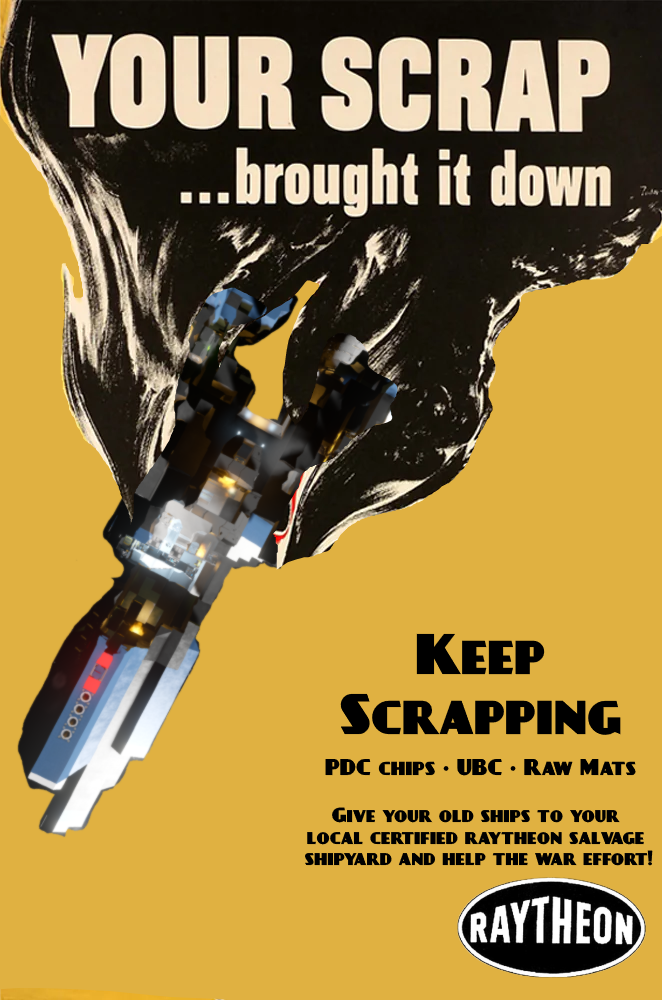
<style>
.page{position:relative;width:662px;height:1000px;background:#e0b141}
.page>*{position:absolute;margin:0}
.t1{font:50px "DayPosterBlack";color:#000000}
.t2{font:20px "DayPosterBlack";color:#000000}
.t3{font:18px "DayPosterBlack";color:#000000}
</style>
<div class="page">
<p class="t1" style="left:340px;top:633px;width:281px;height:102px;text-align:center">Keep<br>Scrapping</p>
<p class="t2" style="left:325px;top:758px;width:311px;height:18px">PDC chips • UBC • Raw Mats</p>
<p class="t3" style="left:304px;top:807px;width:349px;height:59px;text-align:center">Give your old ships to your <br>local certified raytheon salvage <br>shipyard and help the war effort!</p>
</div>
